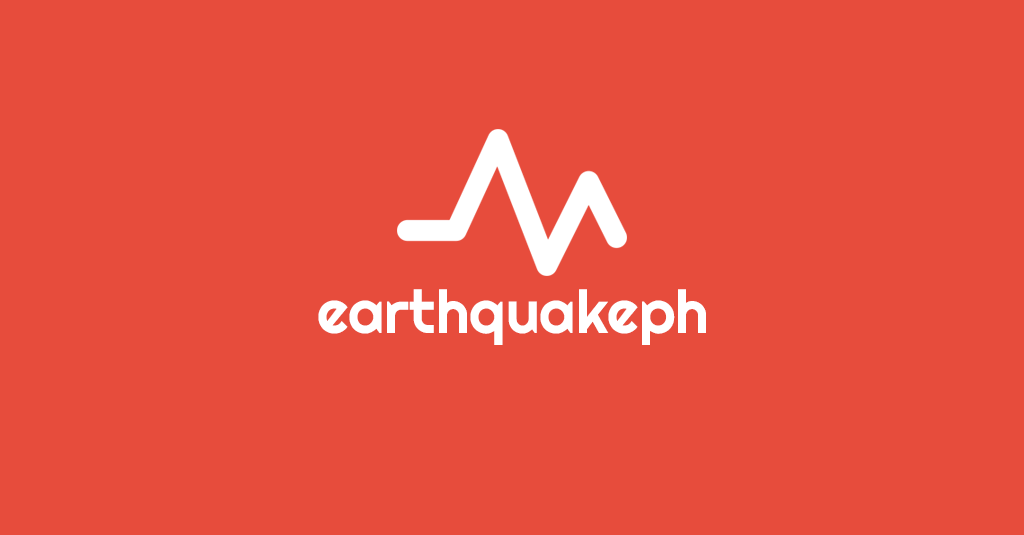
<style>
.page{position:relative;width:1024px;height:535px;background:#e74c3c}
.page>*{position:absolute;margin:0}
.t1{font:60px "Righteous-Regular";color:#ffffff}
</style>
<div class="page">
<p class="t1" style="left:318px;top:289px;width:388px;height:56px">earthquakeph</p>
</div>
